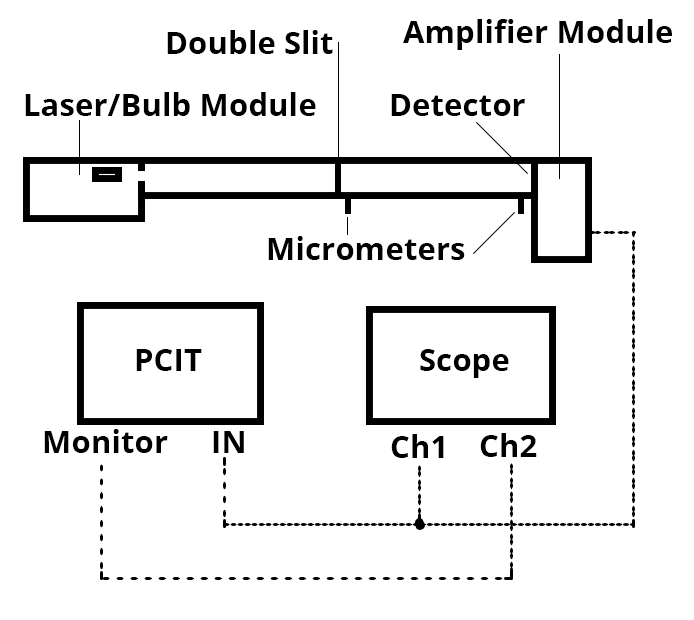
<style>
.page{position:relative;width:694px;height:620px;background:#ffffff}
.page>*{position:absolute;margin:0}
.t1{font:31.2px "OpenSans-Bold";color:#000000}
</style>
<div class="page">
<p class="t1" style="left:167px;top:30px;width:166px;height:24px">Double Slit</p>
<p class="t1" style="left:403px;top:19px;width:269px;height:31px">Amplifier Module</p>
<p class="t1" style="left:25px;top:92px;width:291px;height:24px">Laser/Bulb Module</p>
<p class="t1" style="left:391px;top:94px;width:134px;height:22px">Detector</p>
<p class="t1" style="left:268px;top:236px;width:197px;height:24px">Micrometers</p>
<p class="t1" style="left:136px;top:349px;width:66px;height:22px">PCIT</p>
<p class="t1" style="left:420px;top:349px;width:89px;height:29px">Scope</p>
<p class="t1" style="left:213px;top:431px;width:31px;height:22px">IN</p>
<p class="t1" style="left:391px;top:434px;width:53px;height:24px">Ch1</p>
<p class="t1" style="left:480px;top:433px;width:57px;height:24px">Ch2</p>
</div>
